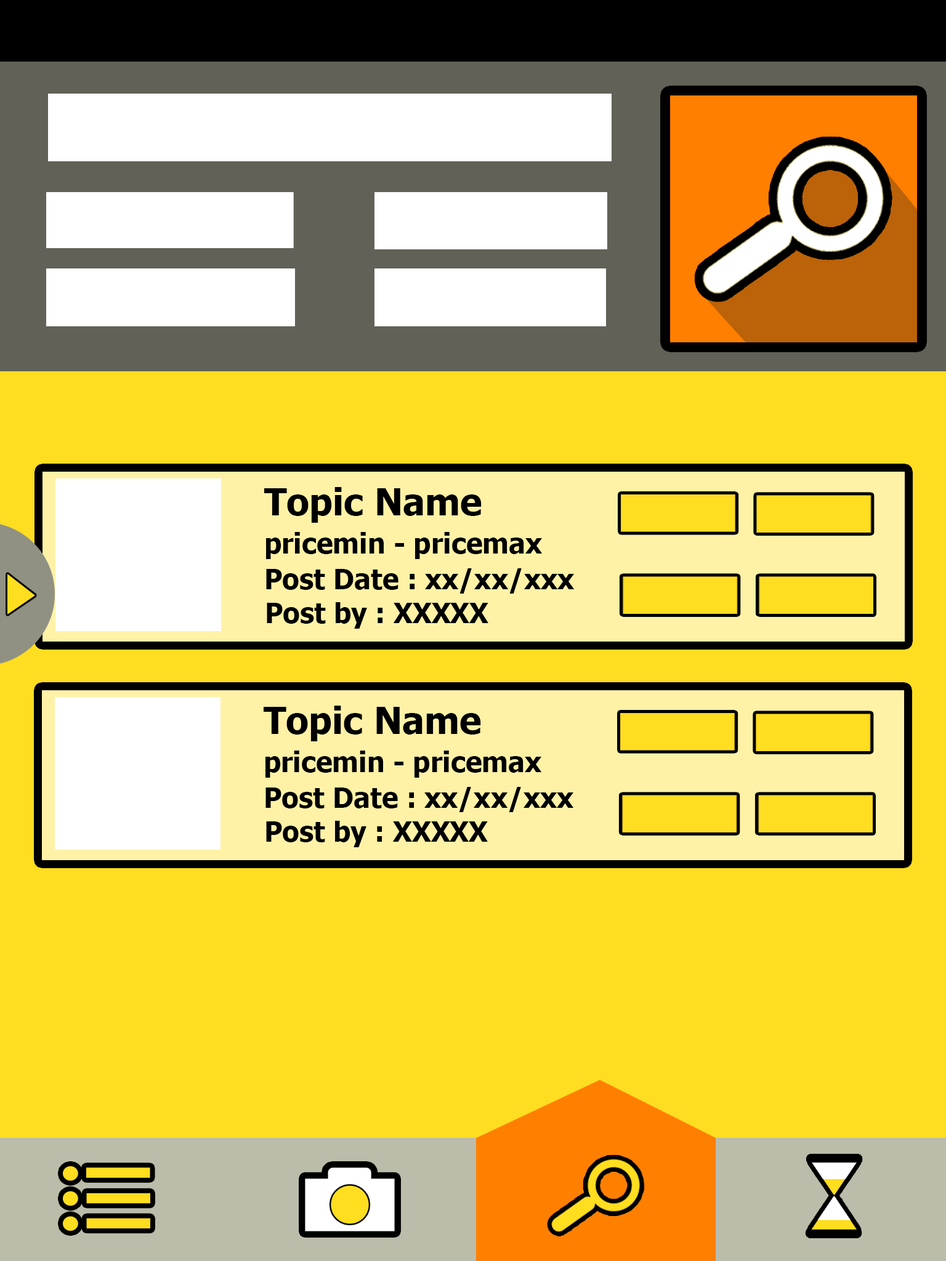
<style>
.page{position:relative;width:946px;height:1261px;background:#ffdd20}
.page>*{position:absolute;margin:0}
.t1{font:36.9px "Tahoma-Bold";color:#000000}
.t2{font:27.7px "Tahoma-Bold";color:#000000}
</style>
<div class="page">
<p class="t1" style="left:264px;top:487px;width:217px;height:36px">Topic Name</p>
<p class="t2" style="left:266px;top:532px;width:276px;height:27px">pricemin - pricemax</p>
<p class="t2" style="left:266px;top:568px;width:308px;height:26px">Post Date : xx/xx/xxx</p>
<p class="t2" style="left:267px;top:602px;width:221px;height:27px">Post by : XXXXX</p>
<p class="t1" style="left:264px;top:706px;width:217px;height:35px">Topic Name</p>
<p class="t2" style="left:265px;top:751px;width:277px;height:27px">pricemin - pricemax</p>
<p class="t2" style="left:265px;top:787px;width:309px;height:25px">Post Date : xx/xx/xxx</p>
<p class="t2" style="left:266px;top:821px;width:222px;height:26px">Post by : XXXXX</p>
</div>
